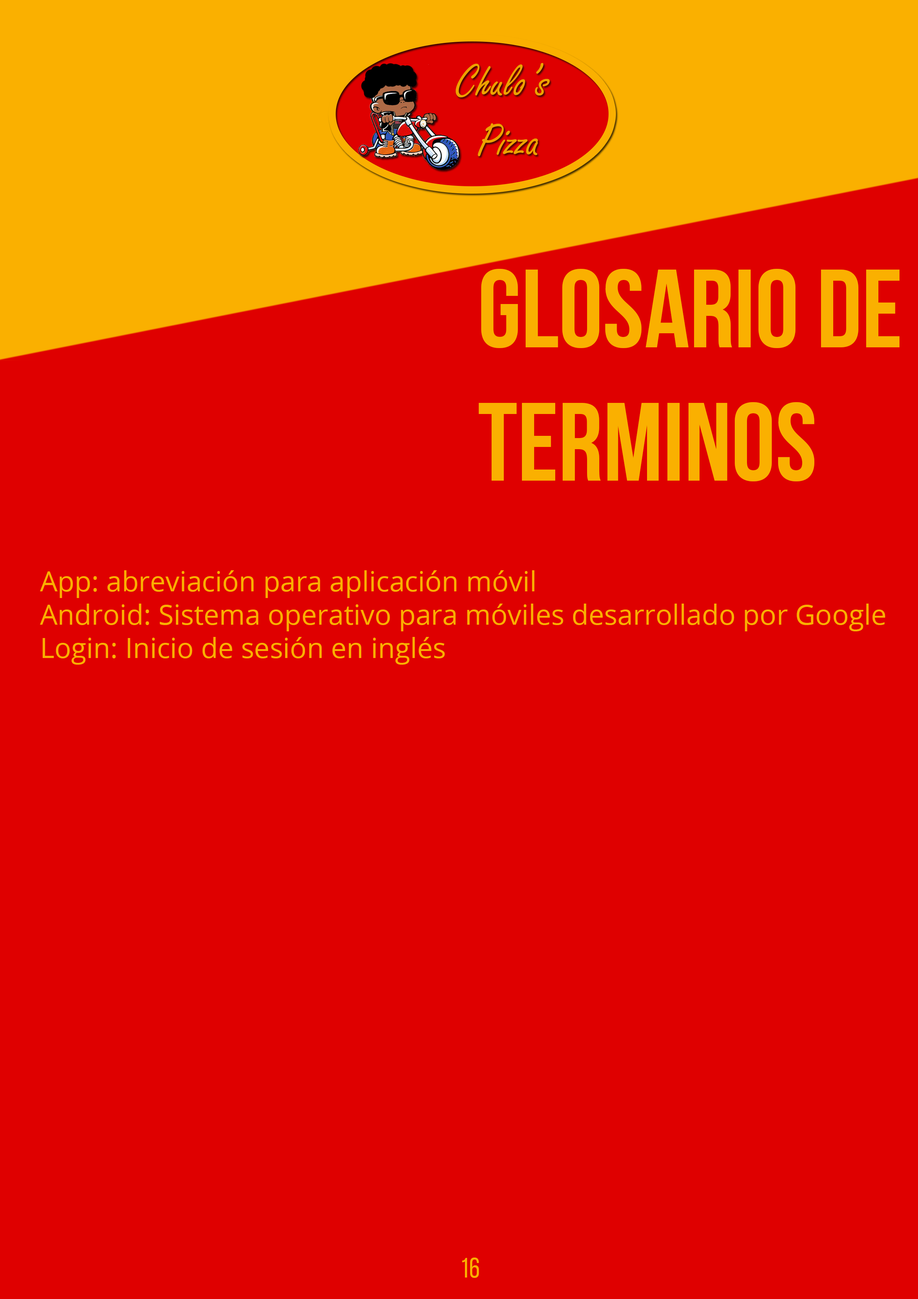
<style>
.page{position:relative;width:918px;height:1299px;background:#df0000}
.page>*{position:absolute;margin:0}
.t1{font:111.1px "BebasNeueBold";color:#fab000}
.t2{font:27.8px "OpenSans";color:#fab000}
.t3{font:27.8px "BebasNeueRegular";color:#fab000}
</style>
<div class="page">
<p class="t1" style="left:479px;top:269px;width:421px;height:212px">glosario de<br>terminos</p>
<p class="t2" style="left:40px;top:570px;width:846px;height:95px">App: abreviación para aplicación móvil<br>Android: Sistema operativo para móviles desarrollado por Google<br>Login: Inicio de sesión en inglés</p>
<p class="t3" style="left:462px;top:1257px;width:17px;height:21px">16</p>
</div>
